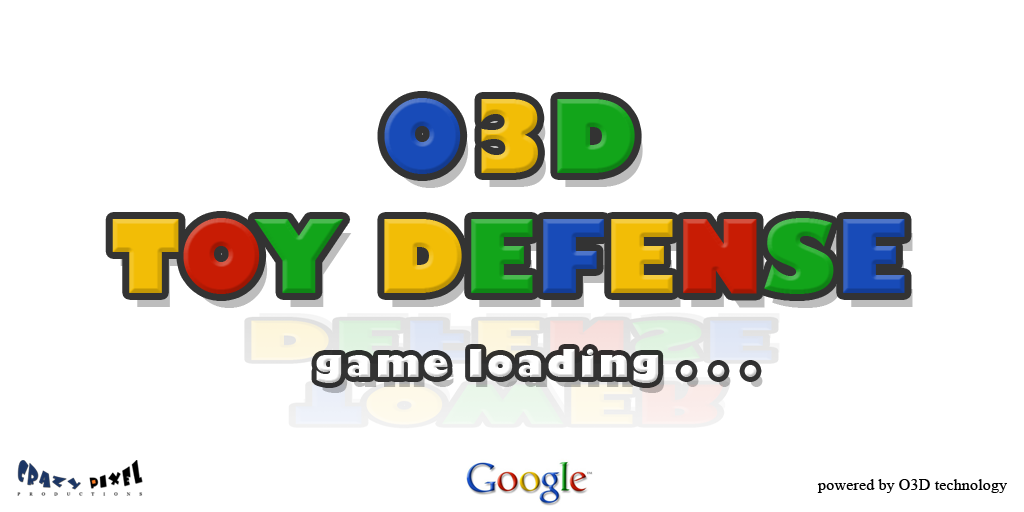
<style>
.page{position:relative;width:1024px;height:512px;background:#ffffff}
.page>*{position:absolute;margin:0}
.t1{font:99.3px "GillSans-UltraBold";color:#184bb8}
.t2{font:99.3px "GillSans-UltraBold";color:#f2bd06}
.t3{font:99.3px "GillSans-UltraBold";color:#12a51a}
.t4{font:99.3px "GillSans-UltraBold";color:#c81c04}
.t5{font:36.6px "GillSans-UltraBold";letter-spacing:0.1em;color:#ffffff}
.t6{font:16.3px "TimesNewRomanPSMT";color:#000000}
</style>
<div class="page">
<p class="t1" style="left:112px;top:98px;width:793px;height:196px;text-align:center">O<span class="t2">3</span><span class="t3">D<br></span><span class="t2">T</span><span class="t4">O</span><span class="t3">Y </span><span class="t2">D</span><span class="t3">E</span>F<span class="t2">E</span><span class="t4">N</span><span class="t3">S</span>E</p>
<p class="t5" style="left:316px;top:349px;width:441px;height:34px">game loading . . .</p>
<p class="t6" style="left:817px;top:479px;width:190px;height:14px">powered by O3D technology</p>
</div>
